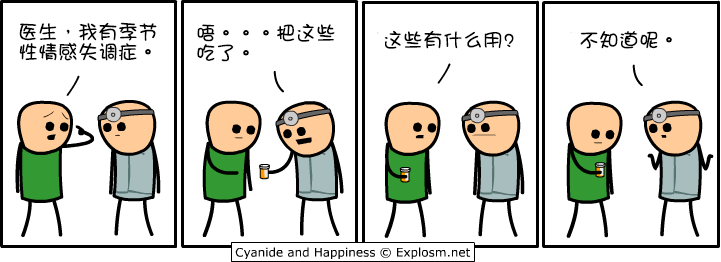
<style>
.page{position:relative;width:721px;height:262px;background:#ffffff}
.page>*{position:absolute;margin:0}
.t1{font:20px/20px "DFGirl";color:#000000}
.t2{font:20px "DFGirl";color:#000000}
</style>
<div class="page">
<p class="t1" style="left:19px;top:22px;width:138px;height:39px">医生，我有季节<br>性情感失调症。</p>
<p class="t1" style="left:197px;top:23px;width:138px;height:39px">唔。。。把这些<br>吃了。</p>
<p class="t2" style="left:384px;top:30px;width:130px;height:19px">这些有什么用?</p>
<p class="t2" style="left:580px;top:31px;width:92px;height:18px">不知道呢。</p>
</div>
